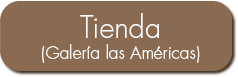
<style>
.page{position:relative;width:238px;height:77px;background:#8a6b51}
.page>*{position:absolute;margin:0}
.t1{font:17.3px/20.9px "Futura-Light";color:#ffffff}
.t2{font:29.3px/20.9px "Futura-Light";color:#ffffff}
</style>
<div class="page">
<p class="t1" style="left:42px;top:13px;width:158px;height:50px;text-align:center"><span class="t2">Tienda<br></span>(Galería las Américas)</p>
</div>
